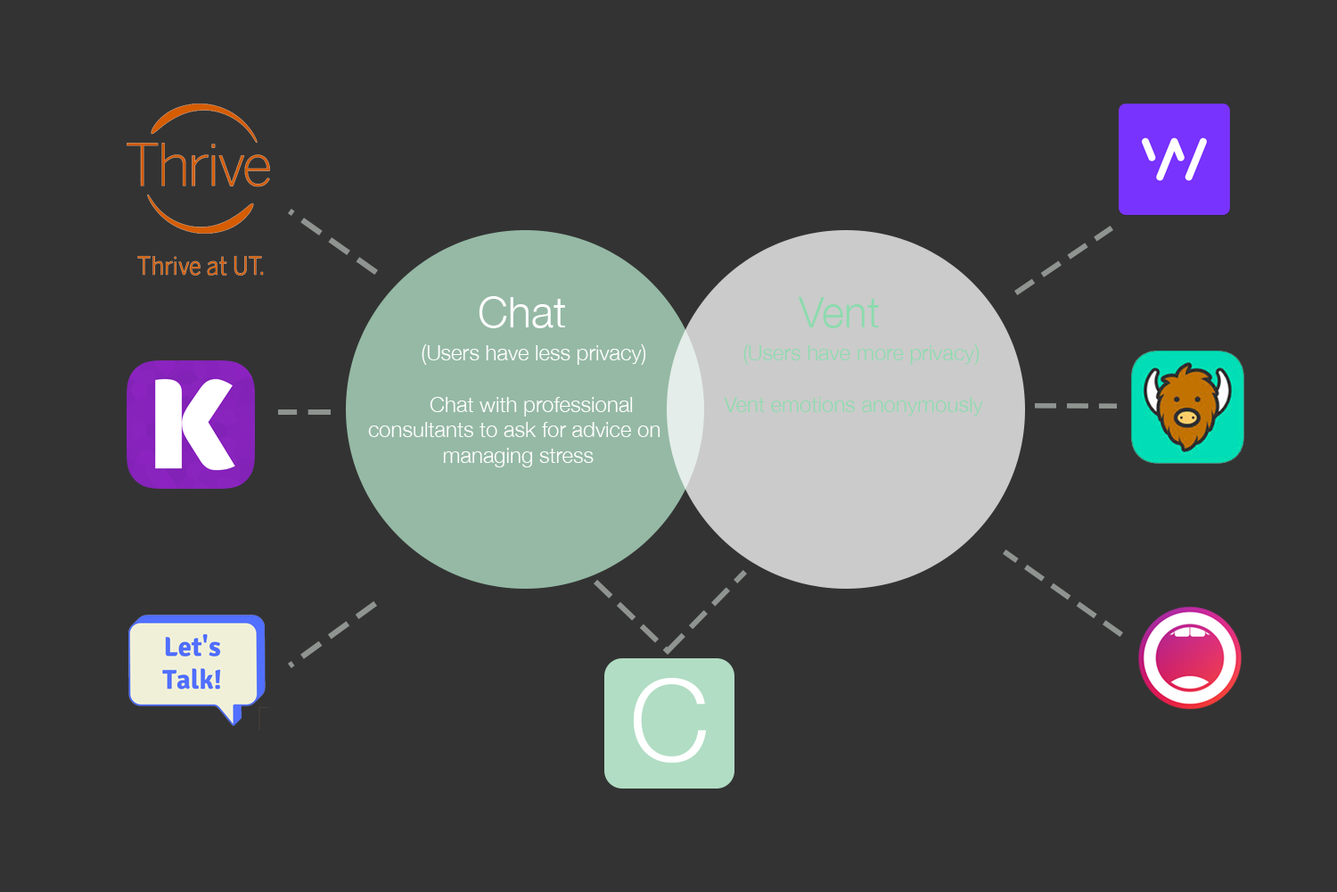
<style>
.page{position:relative;width:1337px;height:892px;background:#333333}
.page>*{position:absolute;margin:0}
.t1{font:42.8px "HelveticaNeue-Light";color:#ffffff}
.t2{font:42.8px "HelveticaNeue-Light";color:#8ddaae}
.t3{font:21.4px "HelveticaNeue-Light";color:#ffffff}
.t4{font:21.4px "HelveticaNeue-Light";color:#8ddaae}
.t5{font:114.1px "HelveticaNeue-Light";color:#ffffff}
</style>
<div class="page">
<p class="t1" style="left:479px;top:296px;width:86px;height:32px">Chat</p>
<p class="t2" style="left:798px;top:297px;width:81px;height:31px">Vent</p>
<p class="t3" style="left:368px;top:344px;width:293px;height:123px">(Users have less privacy)<br><br>             Chat with professional <br>      consultants to ask for advice on          <br>                     managing stress</p>
<p class="t4" style="left:724px;top:344px;width:259px;height:71px">(Users have more privacy)<br><br>         Vent emotions anonymously</p>
<p class="t5" style="left:633px;top:678px;width:74px;height:84px">C</p>
</div>
